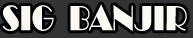
<style>
.page{position:relative;width:193px;height:38px;background:#333333}
.page>*{position:absolute;margin:0}
.t1{font:36px "Broadway";color:#fcf9f4;scale:0.82 1}
</style>
<div class="page">
<p class="t1" style="left:2px;top:4px;width:185px;height:28px">SIG  BANJIR</p>
</div>
